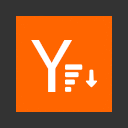
<style>
.page{position:relative;width:128px;height:128px;background:#ff6500}
.page>*{position:absolute;margin:0}
.t1{font:72px "Menlo-Regular";color:#ffffff}
</style>
<div class="page">
<p class="t1" style="left:31px;top:40px;width:41px;height:52px">Y</p>
</div>
